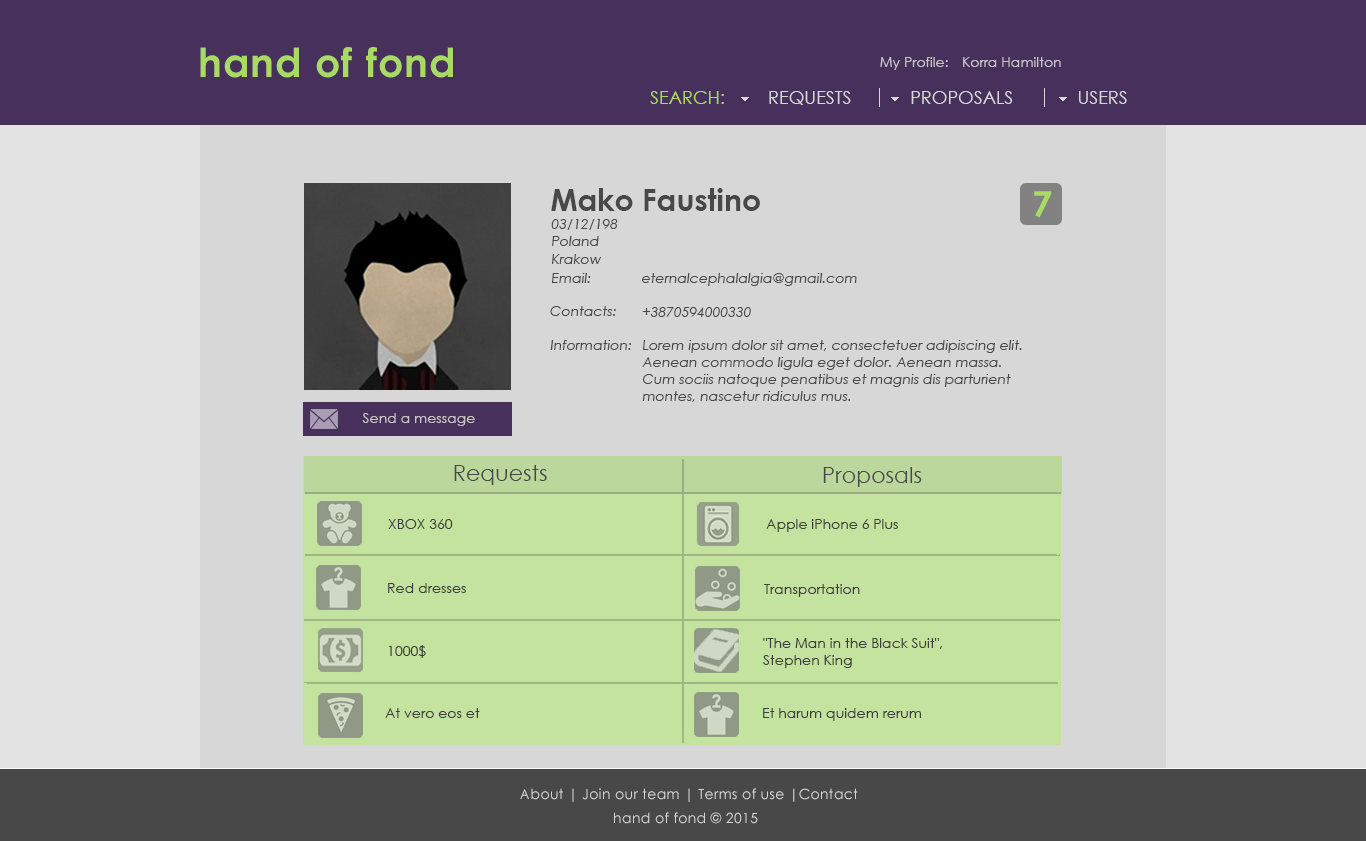
<style>
.page{position:relative;width:1366px;height:841px;background:#d7d7d7}
.page>*{position:absolute;margin:0}
.t1{font:14px "CenturyGothic";color:#c9c5c4}
.t2{font:18px "CenturyGothic";color:#a9da63}
.t3{font:18px "CenturyGothic";color:#d7d7d7}
.t4{font:30px "CenturyGothic-Bold";color:#484848}
.t5{font:22px "CenturyGothic";color:#484848}
.t6{font:14px "CenturyGothic-Italic";color:#484848}
.t7{font:14px "CenturyGothic";color:#3e3e3e}
.t8{font:14px "CenturyGothic";letter-spacing:0.025em;color:#d7d7d7}
</style>
<div class="page">
<p class="t1" style="left:880px;top:57px;width:68px;height:13px">My Profile:</p>
<p class="t1" style="left:963px;top:57px;width:98px;height:10px">Korra Hamilton</p>
<p class="t2" style="left:650px;top:91px;width:74px;height:13px">SEARCH:</p>
<p class="t3" style="left:769px;top:91px;width:82px;height:14px">REQUESTS</p>
<p class="t3" style="left:911px;top:91px;width:102px;height:13px">PROPOSALS</p>
<p class="t3" style="left:1079px;top:91px;width:48px;height:13px">USERS</p>
<p class="t4" style="left:551px;top:188px;width:209px;height:23px"><span class="t5">  </span>Mako Faustino</p>
<p class="t6" style="left:551px;top:219px;width:67px;height:11px">03/12/1989</p>
<p class="t6" style="left:552px;top:236px;width:47px;height:10px">Poland</p>
<p class="t6" style="left:551px;top:254px;width:51px;height:10px">Krakow</p>
<p class="t6" style="left:551px;top:273px;width:40px;height:10px">Email:</p>
<p class="t6" style="left:642px;top:273px;width:215px;height:13px">eternalcephalalgia@gmail.com</p>
<p class="t6" style="left:550px;top:306px;width:66px;height:10px">Contacts:</p>
<p class="t6" style="left:642px;top:307px;width:109px;height:10px">+3870594000330</p>
<p class="t6" style="left:550px;top:340px;width:81px;height:10px">Information:</p>
<p class="t6" style="left:642px;top:340px;width:380px;height:62px">Lorem ipsum dolor sit amet, consectetuer adipiscing elit. <br>Aenean commodo ligula eget dolor. Aenean massa. <br>Cum sociis natoque penatibus et magnis dis parturient <br>montes, nascetur ridiculus mus.</p>
<p class="t1" style="left:362px;top:413px;width:113px;height:13px">Send a message</p>
<p class="t5" style="left:454px;top:465px;width:93px;height:20px">Requests</p>
<p class="t5" style="left:823px;top:467px;width:99px;height:20px">Proposals</p>
<p class="t7" style="left:388px;top:519px;width:65px;height:10px">XBOX 360</p>
<p class="t7" style="left:766px;top:519px;width:132px;height:13px">Apple iPhone 6 Plus</p>
<p class="t7" style="left:388px;top:583px;width:78px;height:10px">Red dresses</p>
<p class="t7" style="left:764px;top:584px;width:96px;height:13px">Transportation</p>
<p class="t7" style="left:763px;top:638px;width:179px;height:30px">"The Man in the Black Suit", <br>Stephen King</p>
<p class="t7" style="left:389px;top:645px;width:37px;height:13px">1000$</p>
<p class="t7" style="left:385px;top:708px;width:95px;height:10px">At vero eos et</p>
<p class="t7" style="left:763px;top:708px;width:158px;height:13px">Et harum quidem rerum</p>
<p class="t8" style="left:520px;top:788px;width:338px;height:14px">About | Join our team | Terms of use |Contact</p>
<p class="t8" style="left:614px;top:812px;width:144px;height:12px">hand of fond © 2015</p>
</div>
